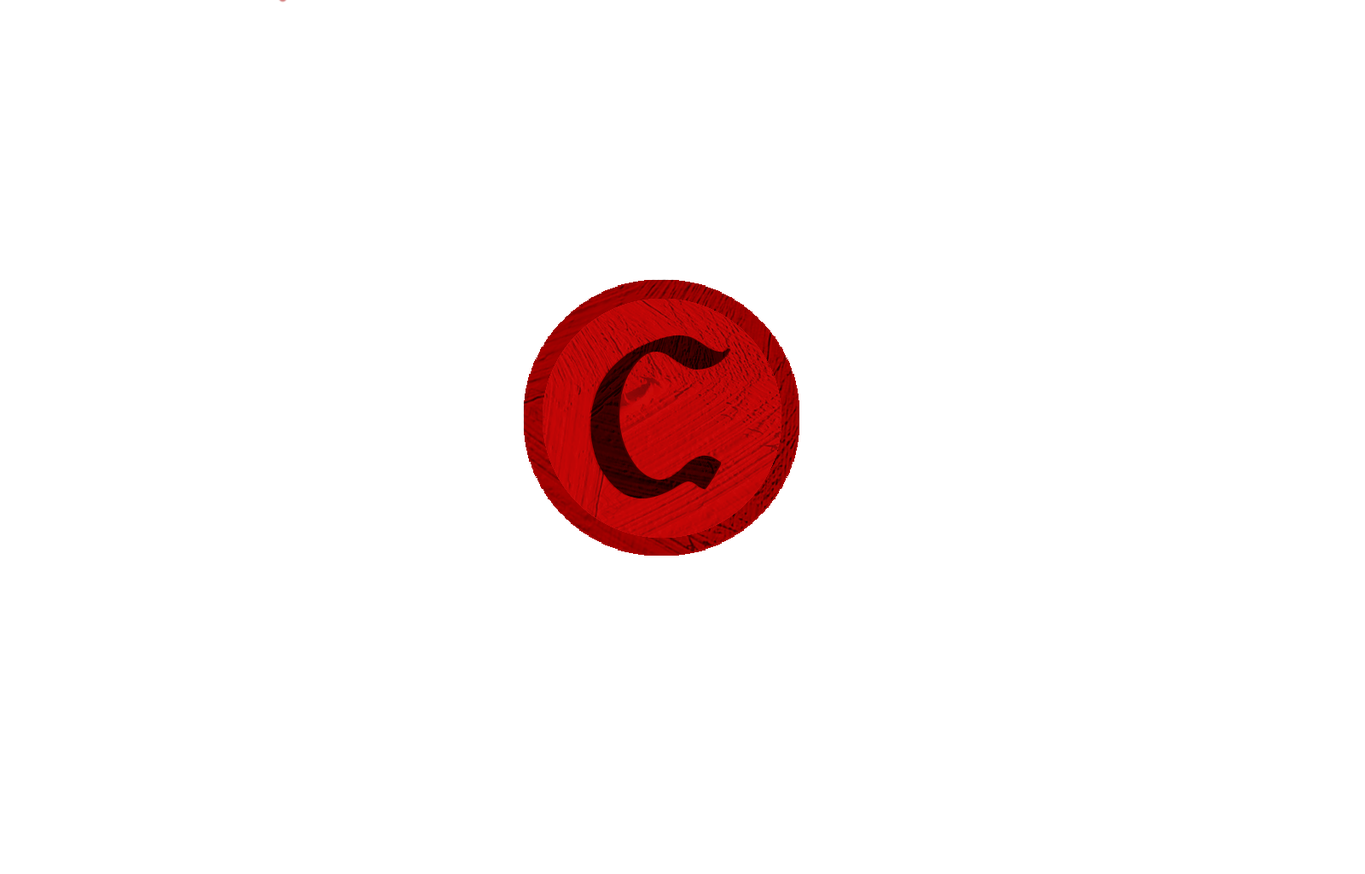
<style>
.page{position:relative;width:1365px;height:874px;background:#ffffff}
.page>*{position:absolute;margin:0}
.t1{font:194.9px "Seagramtfb";color:#380000}
</style>
<div class="page">
<p class="t1" style="left:590px;top:334px;width:141px;height:164px;rotate:9deg">C</p>
</div>
